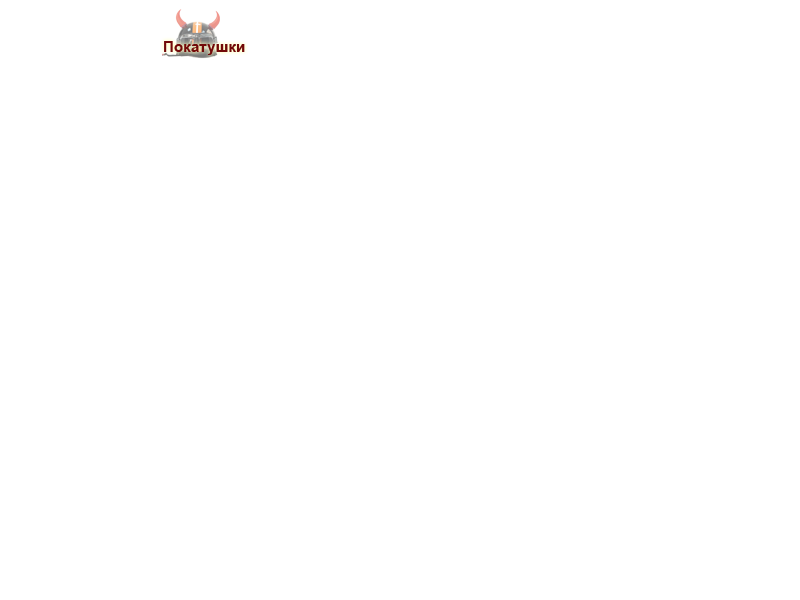
<style>
.page{position:relative;width:800px;height:600px;background:#ffffff}
.page>*{position:absolute;margin:0}
.t1{font:15.2px "Arial-BoldMT";color:#720909}
</style>
<div class="page">
<p class="t1" style="left:164px;top:41px;width:81px;height:14px">Покатушки</p>
</div>
